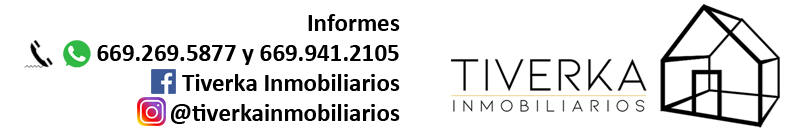
<style>
.page{position:relative;width:800px;height:130px;background:#ffffff}
.page>*{position:absolute;margin:0}
.t1{font:25px "Calibri-Bold";color:#000000}
</style>
<div class="page">
<p class="t1" style="left:97px;top:14px;width:303px;height:110px;text-align:right">Informes<br>669.269.5877 y 669.941.2105<br>Tiverka Inmobiliarios<br>@tiverkainmobiliarios</p>
</div>
